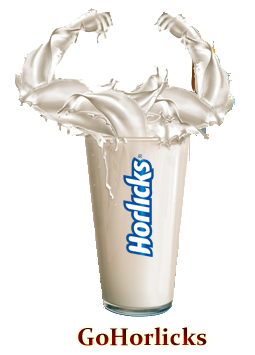
<style>
.page{position:relative;width:255px;height:355px;background:#ffffff}
.page>*{position:absolute;margin:0}
.t1{font:24px "Constantia-Bold"}
</style>
<div class="page">
<p class="t1" style="left:78px;top:327px;width:129px;height:19px">GoHorlicks</p>
</div>
